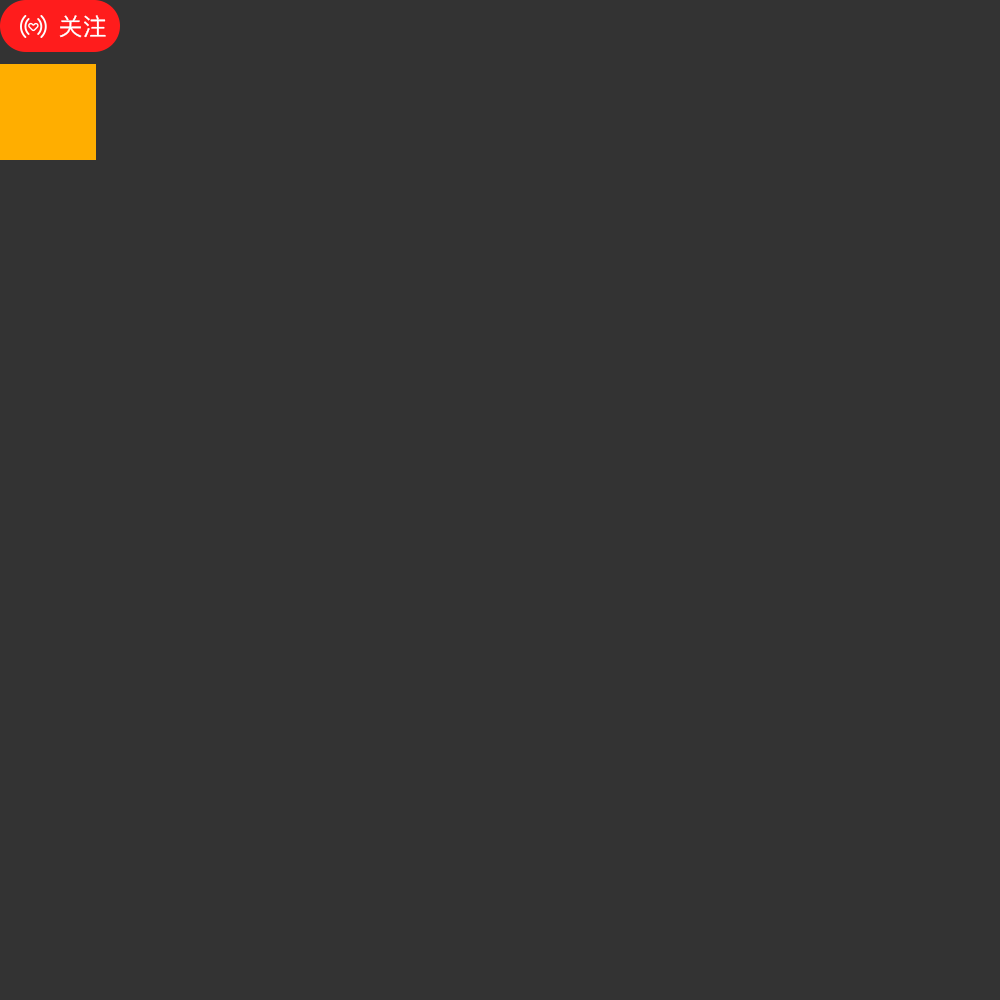
<style>
.page{position:relative;width:1000px;height:1000px;background:#333333}
.page>*{position:absolute;margin:0}
.t1{font:24px "PingFang-SC-Medium";color:#ffffff}
</style>
<div class="page">
<p class="t1" style="left:59px;top:15px;width:47px;height:23px">关注</p>
</div>
